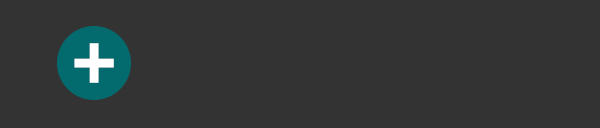
<style>
.page{position:relative;width:600px;height:128px;background:#333333}
.page>*{position:absolute;margin:0}
.t1{font:81px "OpenSans-Bold";color:#ffffff}
</style>
<div class="page">
<p class="t1" style="left:74px;top:43px;width:40px;height:40px">+</p>
</div>
